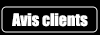
<style>
.page{position:relative;width:100px;height:35px;background:#000000}
.page>*{position:absolute;margin:0}
.t1{font:16px "Impact";color:#ffffff}
</style>
<div class="page">
<p class="t1" style="left:12px;top:13px;width:76px;height:14px">Avis clients</p>
</div>
